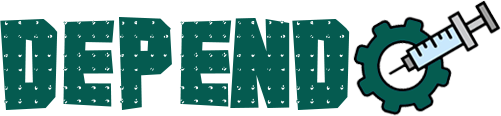
<style>
.page{position:relative;width:501px;height:116px;background:#ffffff}
.page>*{position:absolute;margin:0}
.t1{font:124.8px "IronForgeIrregular";color:#055b50}
</style>
<div class="page">
<p class="t1" style="left:0px;top:17px;width:350px;height:93px">Depend</p>
</div>
